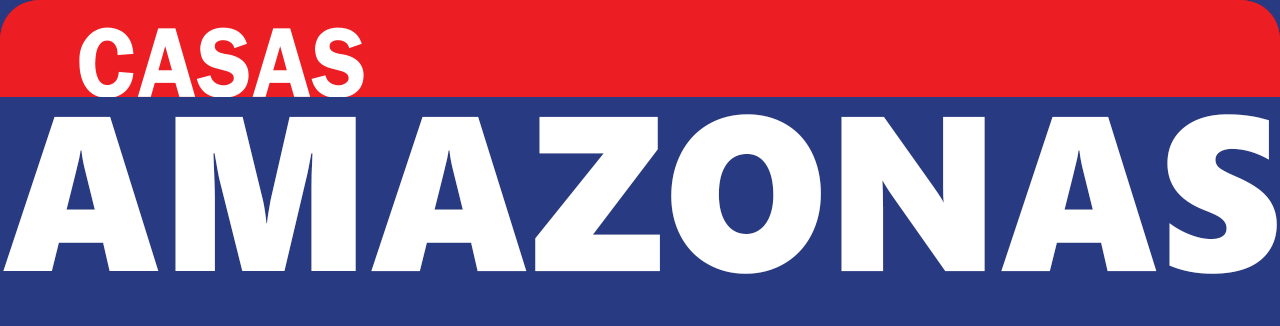
<style>
.page{position:relative;width:1280px;height:326px;background:#273a82}
.page>*{position:absolute;margin:0}
.t1{font:220px "SegoeUIBlack";color:#ffffff;scale:0.96 1}
</style>
<div class="page">
<p class="t1" style="left:3px;top:114px;width:1274px;height:160px">AMAZONAS</p>
</div>
